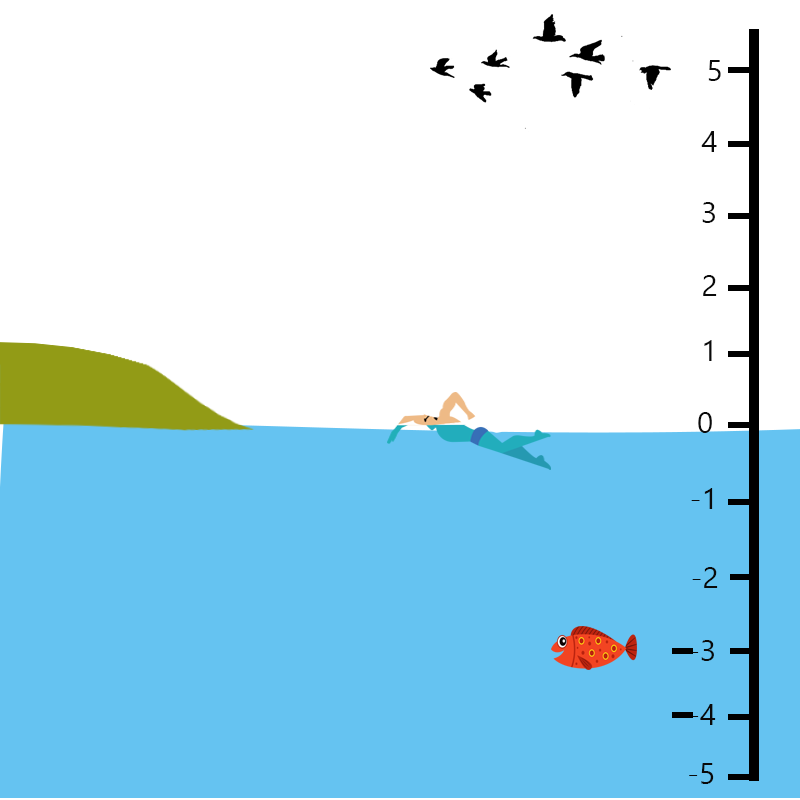
<style>
.page{position:relative;width:800px;height:800px;background:#ffffff}
.page>*{position:absolute;margin:0}
.t1{font:30px "SegoeUISymbol";color:#0a0a0a}
</style>
<div class="page">
<p class="t1" style="left:708px;top:60px;width:13px;height:21px">5</p>
<p class="t1" style="left:701px;top:131px;width:16px;height:21px">4</p>
<p class="t1" style="left:702px;top:202px;width:13px;height:21px">3</p>
<p class="t1" style="left:703px;top:275px;width:14px;height:21px">2</p>
<p class="t1" style="left:704px;top:340px;width:8px;height:21px">1</p>
<p class="t1" style="left:698px;top:412px;width:14px;height:21px">0</p>
<p class="t1" style="left:691px;top:488px;width:22px;height:21px">-1</p>
<p class="t1" style="left:692px;top:567px;width:26px;height:21px">-2</p>
<p class="t1" style="left:690px;top:640px;width:24px;height:21px">-3</p>
<p class="t1" style="left:690px;top:704px;width:26px;height:21px">-4</p>
<p class="t1" style="left:689px;top:763px;width:25px;height:21px">-5</p>
</div>
